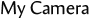
<style>
.page{position:relative;width:90px;height:18px;background:#ffffff}
.page>*{position:absolute;margin:0}
.t1{font:18.7px "Amira-Roman";color:#000000}
</style>
<div class="page">
<p class="t1" style="left:1px;top:1px;width:88px;height:17px;opacity:0.96">My Camera</p>
</div>
